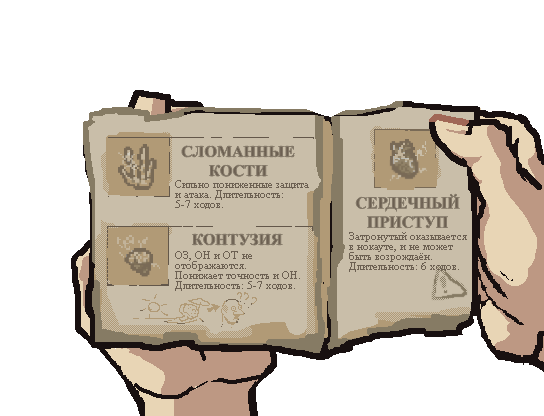
<style>
.page{position:relative;width:544px;height:416px;background:#ffffff}
.page>*{position:absolute;margin:0}
.t1{font:16px "TimesNewRomanPS-BoldMT";color:#6c6052}
.t2{font:11px/10px "TimesNewRomanPSMT";color:#6c6052}
</style>
<div class="page">
<p class="t1" style="left:182px;top:146px;width:113px;height:31px;text-align:center">СЛОМАННЫЕ<br>КОСТИ</p>
<p class="t2" style="left:175px;top:180px;width:134px;height:29px">Сильно пониженные защита<br>и атака. Длительность:<br>5-7 ходов.</p>
<p class="t1" style="left:356px;top:194px;width:104px;height:34px;text-align:center">СЕРДЕЧНЫЙ<br>ПРИСТУП</p>
<p class="t2" style="left:349px;top:232px;width:118px;height:40px">Затронутый оказывается<br>в нокауте, и не может<br>быть возрождаён.<br>Длительность: 6 ходов.</p>
<p class="t1" style="left:192px;top:234px;width:91px;height:11px">КОНТУЗИЯ</p>
<p class="t2" style="left:175px;top:251px;width:125px;height:40px">ОЗ, ОН и ОТ не<br>отображаются.<br>Понижает точность и ОН.<br>Длительность: 5-7 ходов.</p>
</div>
